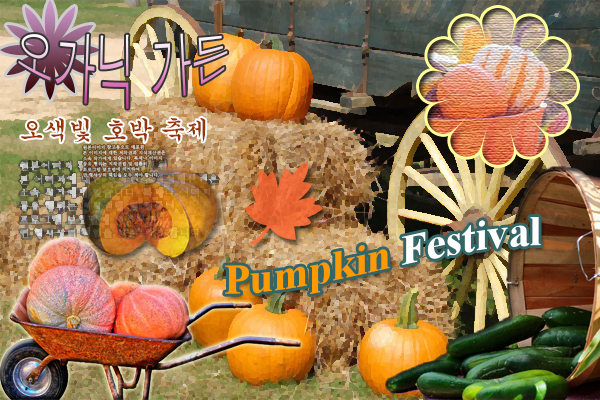
<style>
.page{position:relative;width:600px;height:400px}
.page>*{position:absolute;margin:0}
.t1{font:40px "Dotum"}
.t2{font:25px "Gungsuh";color:#993300}
.t3{font:42px "TimesNewRomanPS-BoldMT";color:#ffffff}
.t4{font:42px "TimesNewRomanPS-BoldMT";color:#ff9900}
</style>
<div class="page">
<p class="t1" style="left:18px;top:33px;width:210px;height:76px">오가닉 가든</p>
<p class="t2" style="left:21px;top:118px;width:185px;height:25px">오색빛 호박 축제</p>
<p class="t3" style="left:225px;top:217px;width:316px;height:78px"><span class="t4">Pumpkin </span>Festival</p>
</div>
